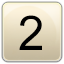
<style>
.page{position:relative;width:64px;height:64px}
.page>*{position:absolute;margin:0}
.t1{font:48px "ArialMT";color:#000000}
</style>
<div class="page">
<p class="t1" style="left:19px;top:15px;width:23px;height:35px">2</p>
</div>
